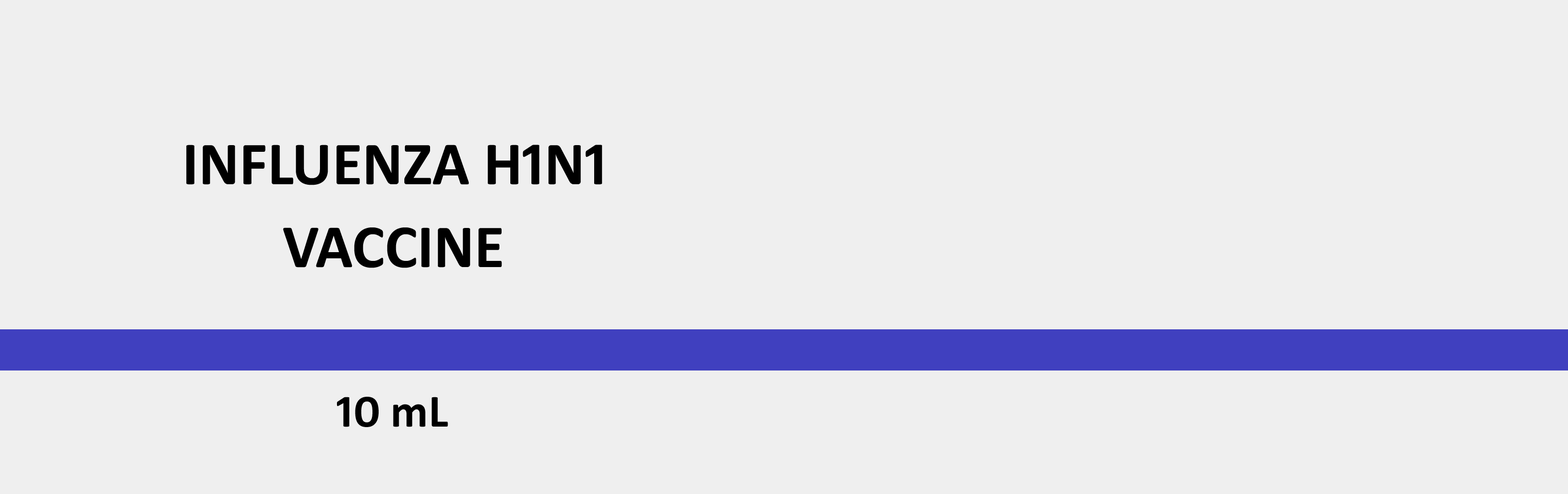
<style>
.page{position:relative;width:1568px;height:494px;background:#efefef}
.page>*{position:absolute;margin:0}
.t1{font:61.7px "Calibri-Bold";color:#000000}
.t2{font:46.3px "Calibri-Bold";color:#000000}
</style>
<div class="page">
<p class="t1" style="left:186px;top:145px;width:416px;height:40px">INFLUENZA H1N1</p>
<p class="t1" style="left:283px;top:227px;width:219px;height:41px">VACCINE</p>
<p class="t2" style="left:337px;top:397px;width:111px;height:30px">10 mL</p>
</div>
